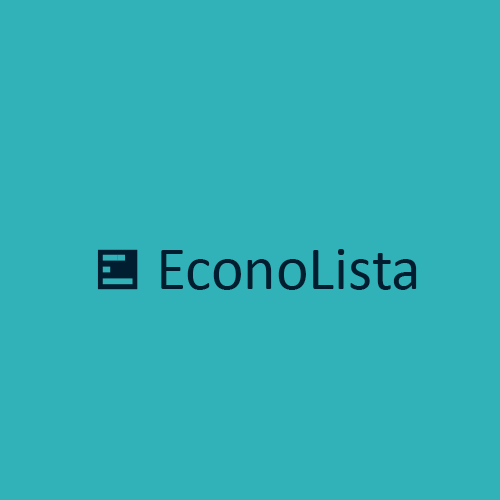
<style>
.page{position:relative;width:500px;height:500px;background:#31b2b9}
.page>*{position:absolute;margin:0}
.t1{font:61.7px "Calibri";color:#001e2f}
</style>
<div class="page">
<p class="t1" style="left:161px;top:249px;width:256px;height:41px">EconoLista</p>
</div>
